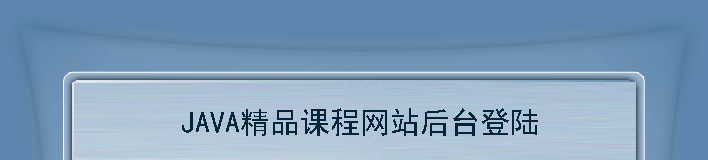
<style>
.page{position:relative;width:708px;height:160px;background:#5c86ad}
.page>*{position:absolute;margin:0}
.t1{font:30px "SimHei";color:#03253a}
</style>
<div class="page">
<p class="t1" style="left:182px;top:108px;width:356px;height:28px">JAVA精品课程网站后台登陆</p>
</div>
